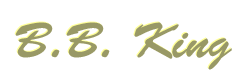
<style>
.page{position:relative;width:246px;height:80px;background:#ffffff}
.page>*{position:absolute;margin:0}
.t1{font:49.8px "BrushScriptStd";color:#999966}
</style>
<div class="page">
<p class="t1" style="left:14px;top:21px;width:217px;height:48px">B.B. King</p>
<p class="t1" style="left:15px;top:22px;width:217px;height:48px">B.B. King</p>
</div>
